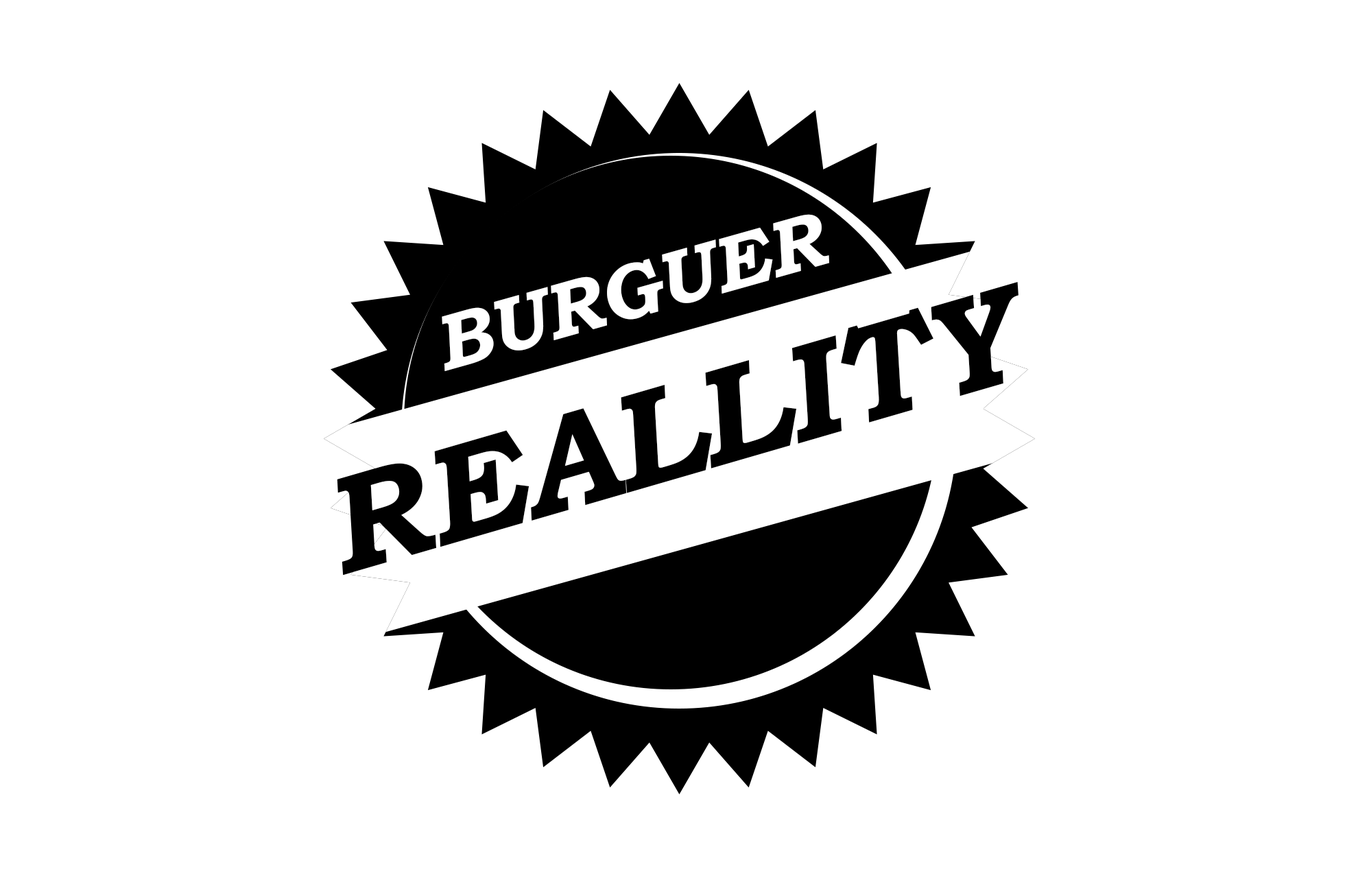
<style>
.page{position:relative;width:1358px;height:878px;background:#ffffff}
.page>*{position:absolute;margin:0}
.t1{font:77.9px "BookmanOldStyle-BoldItalic";color:#ffffff}
.t2{font:137.1px "BookmanOldStyle-BoldItalic";color:#000000}
</style>
<div class="page">
<p class="t1" style="left:442px;top:214px;width:388px;height:158px;rotate:-16deg">BURGUER</p>
<p class="t2" style="left:337px;top:282px;width:682px;height:293px;rotate:-16deg">REALLITY</p>
</div>
